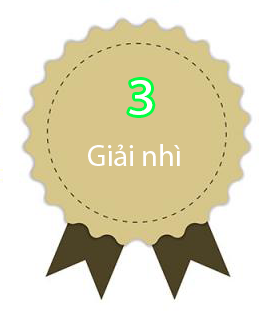
<style>
.page{position:relative;width:275px;height:319px;background:#ffffff}
.page>*{position:absolute;margin:0}
.t1{font:52.4px "MyriadPro-Regular";color:#ffffff;scale:1.08 1}
.t2{font:30px "MyriadPro-Regular";color:#ffffff}
</style>
<div class="page">
<p class="t1" style="left:129px;top:80px;width:24px;height:35px">3</p>
<p class="t2" style="left:88px;top:144px;width:92px;height:22px">Giải nhì</p>
</div>
